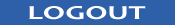
<style>
.page{position:relative;width:175px;height:25px;background:#2e5fa9}
.page>*{position:absolute;margin:0}
.t1{font:20px "Candara-Bold";color:#ffffff;scale:1.6 1}
</style>
<div class="page">
<p class="t1" style="left:29px;top:6px;width:117px;height:14px">LOGOUT</p>
</div>
